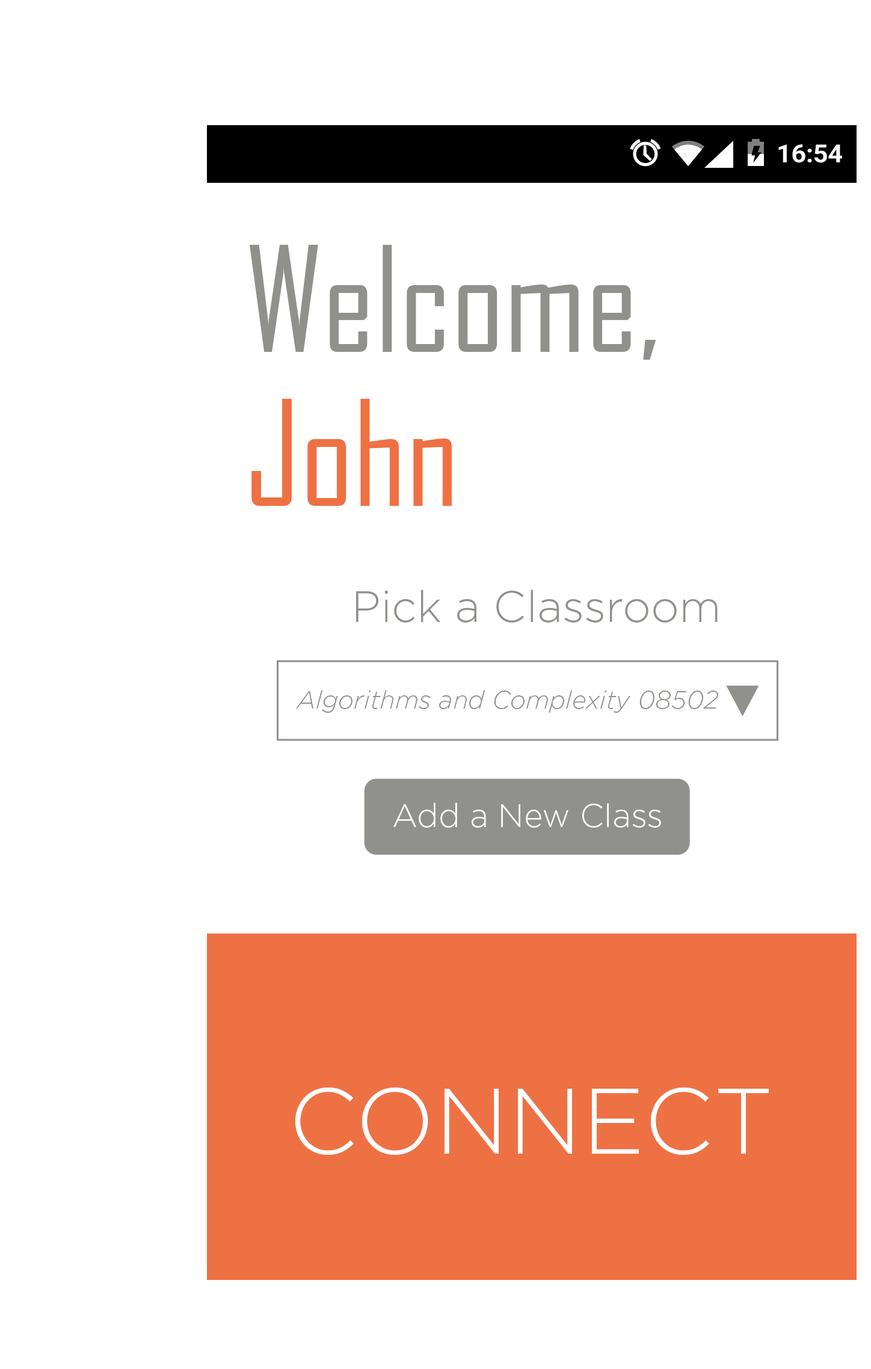
<style>
.page{position:relative;width:871px;height:1369px;background:#ffffff}
.page>*{position:absolute;margin:0}
.t1{font:139.9px/153.5px "AgencyFB-Reg";color:#90918c}
.t2{font:139.9px/153.5px "AgencyFB-Reg";color:#ee7143}
.t3{font:44.1px "Gotham-Light";color:#90918c}
.t4{font:24.9px "Gotham-LightItalic";color:#90918c}
.t5{font:32.6px "Gotham-Light";color:#ffffff}
.t6{font:93.2px "Gotham-Light";color:#ffffff}
</style>
<div class="page">
<p class="t1" style="left:249px;top:245px;width:407px;height:261px">Welcome,<br><span class="t2">John</span></p>
<p class="t3" style="left:356px;top:589px;width:362px;height:34px">Pick a Classroom</p>
<p class="t4" style="left:296px;top:690px;width:422px;height:23px">Algorithms and Complexity 08502</p>
<p class="t5" style="left:393px;top:802px;width:268px;height:26px">Add a New Class</p>
<p class="t6" style="left:295px;top:1088px;width:474px;height:67px">CONNECT</p>
</div>
